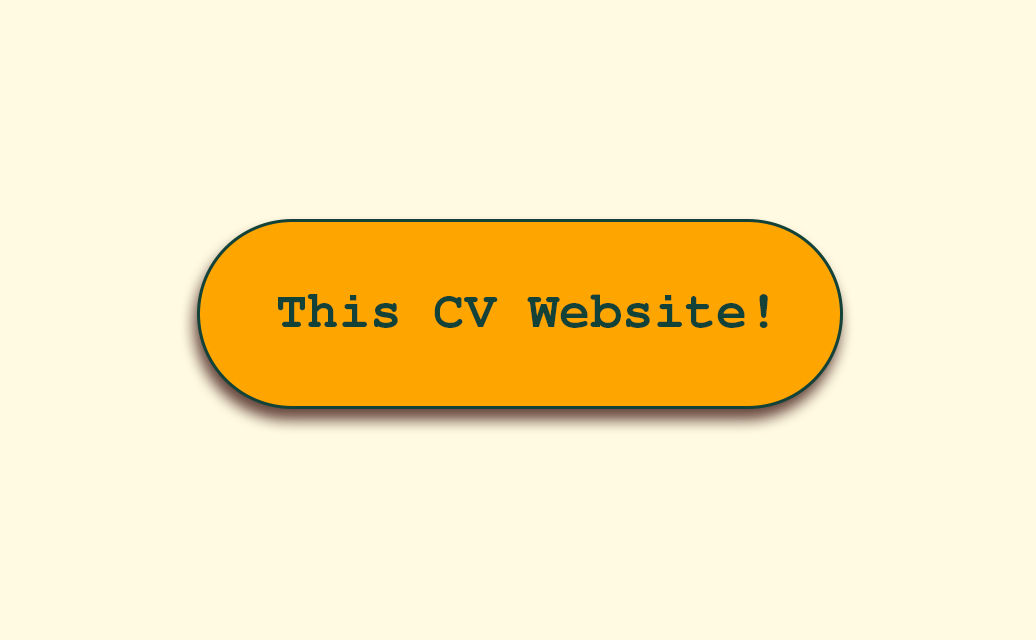
<style>
.page{position:relative;width:1036px;height:640px;background:#fffae1}
.page>*{position:absolute;margin:0}
.t1{font:52px "NimbusMono-Bold";letter-spacing:0.005em;color:#124238}
</style>
<div class="page">
<p class="t1" style="left:278px;top:294px;width:490px;height:34px">This CV Website!</p>
</div>
